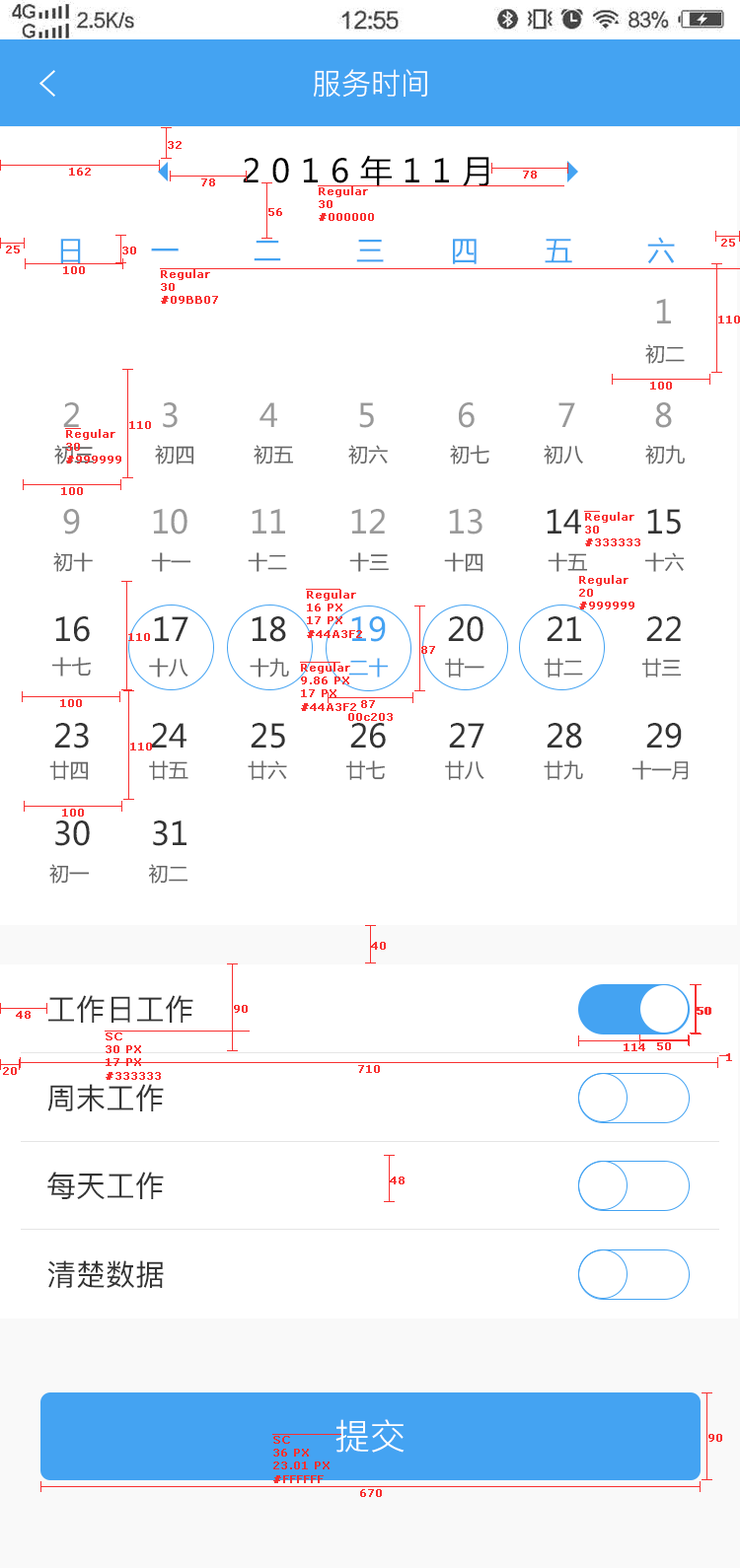
<style>
.page{position:relative;width:740px;height:1568px;background:#ffffff}
.page>*{position:absolute;margin:0}
.t1{font:29.6px "PingFang-SC-Regular";color:#ffffff;text-transform:uppercase}
.t2{font:10.8px "Verdana";color:#f83030;font-weight:bold}
.t3{font:32px "MicrosoftYaHei";letter-spacing:0.34em;color:#000000;text-transform:uppercase}
.t4{font:28px "MicrosoftYaHei";color:#44a3f2;text-transform:uppercase}
.t5{font:32px "MicrosoftYaHei";color:#999999;text-transform:uppercase}
.t6{font:19.7px "MicrosoftYaHei";color:#666666;text-transform:uppercase}
.t7{font:32px "MicrosoftYaHei";color:#333333;text-transform:uppercase}
.t8{font:32px "MicrosoftYaHei";color:#44a3f2;text-transform:uppercase}
.t9{font:19.7px "MicrosoftYaHei";color:#44a3f2;text-transform:uppercase}
.t10{font:29.6px "PingFang-SC-Medium";color:#333333;text-transform:uppercase}
.t11{font:35.5px "PingFang-SC-Regular";color:#ffffff;text-transform:uppercase}
</style>
<div class="page">
<p class="t1" style="left:314px;top:69px;width:113px;height:29px">服务时间</p>
<p class="t2" style="left:168px;top:141px;width:13px;height:8px">32</p>
<p class="t3" style="left:243px;top:155px;width:246px;height:32px">2016年11月</p>
<p class="t2" style="left:69px;top:168px;width:22px;height:8px">162</p>
<p class="t2" style="left:523px;top:171px;width:13px;height:7px">78</p>
<p class="t2" style="left:201px;top:178px;width:14px;height:8px">78</p>
<p class="t2" style="left:319px;top:186px;width:55px;height:35px">Regular<br>30<br>#000000</p>
<p class="t2" style="left:268px;top:208px;width:14px;height:8px">56</p>
<p class="t2" style="left:6px;top:246px;width:14px;height:7px">25</p>
<p class="t4" style="left:60px;top:237px;width:615px;height:27px">日        一         二         三        四        五         六</p>
<p class="t2" style="left:721px;top:239px;width:14px;height:8px">25</p>
<p class="t2" style="left:122px;top:247px;width:14px;height:7px">30</p>
<p class="t2" style="left:63px;top:266px;width:22px;height:8px">100</p>
<p class="t2" style="left:161px;top:269px;width:57px;height:35px">Regular<br>30<br>#09BB07</p>
<p class="t5" style="left:656px;top:299px;width:15px;height:24px">1</p>
<p class="t2" style="left:718px;top:316px;width:22px;height:7px">110</p>
<p class="t6" style="left:645px;top:344px;width:39px;height:20px">初二</p>
<p class="t2" style="left:650px;top:382px;width:22px;height:8px">100</p>
<p class="t5" style="left:63px;top:402px;width:16px;height:25px">2</p>
<p class="t5" style="left:163px;top:402px;width:15px;height:26px">3</p>
<p class="t5" style="left:259px;top:402px;width:18px;height:25px">4</p>
<p class="t5" style="left:359px;top:402px;width:15px;height:26px">5</p>
<p class="t5" style="left:459px;top:402px;width:15px;height:26px">6</p>
<p class="t5" style="left:558px;top:402px;width:17px;height:25px">7</p>
<p class="t5" style="left:655px;top:402px;width:17px;height:26px">8</p>
<p class="t2" style="left:129px;top:421px;width:22px;height:8px">110</p>
<p class="t2" style="left:66px;top:429px;width:55px;height:34px">Regular<br>30<br>#999999</p>
<p class="t6" style="left:54px;top:445px;width:40px;height:19px">初三</p>
<p class="t6" style="left:155px;top:445px;width:39px;height:19px">初四</p>
<p class="t6" style="left:253px;top:445px;width:41px;height:19px">初五</p>
<p class="t6" style="left:348px;top:445px;width:40px;height:19px">初六</p>
<p class="t6" style="left:450px;top:445px;width:39px;height:19px">初七</p>
<p class="t6" style="left:543px;top:445px;width:40px;height:19px">初八</p>
<p class="t6" style="left:645px;top:445px;width:39px;height:19px">初九</p>
<p class="t2" style="left:61px;top:487px;width:22px;height:8px">100</p>
<p class="t5" style="left:63px;top:509px;width:17px;height:26px">9</p>
<p class="t5" style="left:153px;top:509px;width:34px;height:26px">10</p>
<p class="t5" style="left:251px;top:509px;width:34px;height:25px">11</p>
<p class="t5" style="left:351px;top:509px;width:34px;height:25px">12</p>
<p class="t5" style="left:449px;top:509px;width:33px;height:26px">13</p>
<p class="t7" style="left:546px;top:509px;width:35px;height:25px">14</p>
<p class="t7" style="left:647px;top:509px;width:33px;height:26px">15</p>
<p class="t2" style="left:585px;top:512px;width:55px;height:34px">Regular<br>30<br>#333333</p>
<p class="t6" style="left:53px;top:552px;width:40px;height:20px">初十</p>
<p class="t6" style="left:151px;top:552px;width:40px;height:20px">十一</p>
<p class="t6" style="left:248px;top:552px;width:39px;height:20px">十二</p>
<p class="t6" style="left:349px;top:552px;width:40px;height:20px">十三</p>
<p class="t6" style="left:444px;top:552px;width:39px;height:20px">十四</p>
<p class="t6" style="left:547px;top:552px;width:41px;height:20px">十五</p>
<p class="t6" style="left:644px;top:552px;width:40px;height:20px">十六</p>
<p class="t2" style="left:579px;top:575px;width:55px;height:34px">Regular<br>20<br>#999999</p>
<p class="t2" style="left:307px;top:590px;width:55px;height:48px">Regular<br>16 PX<br>17 PX<br>#44A3F2</p>
<p class="t7" style="left:55px;top:616px;width:35px;height:26px">16</p>
<p class="t7" style="left:154px;top:616px;width:34px;height:25px">17</p>
<p class="t7" style="left:251px;top:616px;width:35px;height:26px">18</p>
<p class="t8" style="left:351px;top:616px;width:35px;height:26px">19</p>
<p class="t7" style="left:448px;top:616px;width:35px;height:26px">20</p>
<p class="t7" style="left:546px;top:616px;width:35px;height:25px">21</p>
<p class="t7" style="left:646px;top:616px;width:34px;height:25px">22</p>
<p class="t2" style="left:128px;top:633px;width:22px;height:8px">110</p>
<p class="t2" style="left:421px;top:646px;width:14px;height:8px">87</p>
<p class="t6" style="left:51px;top:657px;width:40px;height:20px">十七</p>
<p class="t6" style="left:149px;top:658px;width:39px;height:19px">十八</p>
<p class="t6" style="left:249px;top:658px;width:40px;height:19px">十九</p>
<p class="t2" style="left:301px;top:663px;width:55px;height:48px">Regular<br>9.86 PX<br>17 PX<br>#44A3F2</p>
<p class="t9" style="left:348px;top:658px;width:41px;height:19px">二十</p>
<p class="t6" style="left:445px;top:658px;width:39px;height:19px">廿一</p>
<p class="t6" style="left:543px;top:658px;width:40px;height:19px">廿二</p>
<p class="t6" style="left:641px;top:658px;width:40px;height:19px">廿三</p>
<p class="t2" style="left:60px;top:699px;width:22px;height:8px">100</p>
<p class="t2" style="left:348px;top:700px;width:44px;height:21px;text-align:center">87 <br>00c203</p>
<p class="t7" style="left:54px;top:723px;width:35px;height:25px">23</p>
<p class="t7" style="left:151px;top:723px;width:35px;height:25px">24</p>
<p class="t7" style="left:250px;top:723px;width:35px;height:25px">25</p>
<p class="t7" style="left:350px;top:723px;width:36px;height:25px">26</p>
<p class="t7" style="left:449px;top:723px;width:35px;height:25px">27</p>
<p class="t7" style="left:546px;top:723px;width:36px;height:25px">28</p>
<p class="t7" style="left:646px;top:723px;width:35px;height:25px">29</p>
<p class="t2" style="left:130px;top:743px;width:22px;height:7px">110</p>
<p class="t6" style="left:49px;top:760px;width:40px;height:20px">廿四</p>
<p class="t6" style="left:149px;top:760px;width:39px;height:20px">廿五</p>
<p class="t6" style="left:248px;top:760px;width:39px;height:20px">廿六</p>
<p class="t6" style="left:345px;top:760px;width:40px;height:20px">廿七</p>
<p class="t6" style="left:445px;top:760px;width:39px;height:20px">廿八</p>
<p class="t6" style="left:543px;top:760px;width:40px;height:20px">廿九</p>
<p class="t6" style="left:631px;top:760px;width:57px;height:20px">十一月</p>
<p class="t2" style="left:62px;top:809px;width:22px;height:8px">100</p>
<p class="t7" style="left:55px;top:820px;width:35px;height:26px">30</p>
<p class="t7" style="left:153px;top:820px;width:33px;height:26px">31</p>
<p class="t6" style="left:49px;top:864px;width:41px;height:20px">初一</p>
<p class="t6" style="left:149px;top:864px;width:39px;height:20px">初二</p>
<p class="t2" style="left:371px;top:942px;width:15px;height:8px">40</p>
<p class="t10" style="left:48px;top:995px;width:145px;height:28px">工作日工作</p>
<p class="t2" style="left:16px;top:1011px;width:15px;height:8px">48</p>
<p class="t2" style="left:234px;top:1005px;width:14px;height:8px">90</p>
<p class="t2" style="left:696px;top:1007px;width:14px;height:8px">50</p>
<p class="t2" style="left:697px;top:1007px;width:14px;height:8px">50</p>
<p class="t2" style="left:106px;top:1033px;width:55px;height:47px">SC<br>30 PX<br>17 PX<br>#333333</p>
<p class="t2" style="left:623px;top:1043px;width:22px;height:8px">114</p>
<p class="t2" style="left:657px;top:1042px;width:14px;height:8px">50</p>
<p class="t2" style="left:726px;top:1053px;width:6px;height:8px">1</p>
<p class="t2" style="left:3px;top:1067px;width:14px;height:8px">20</p>
<p class="t2" style="left:358px;top:1065px;width:22px;height:8px">710</p>
<p class="t10" style="left:47px;top:1084px;width:117px;height:27px">周末工作</p>
<p class="t10" style="left:47px;top:1172px;width:117px;height:27px">每天工作</p>
<p class="t2" style="left:390px;top:1176px;width:14px;height:8px">48</p>
<p class="t10" style="left:47px;top:1260px;width:117px;height:28px">清楚数据</p>
<p class="t11" style="left:335px;top:1419px;width:69px;height:34px">提交</p>
<p class="t2" style="left:708px;top:1434px;width:14px;height:8px">90</p>
<p class="t2" style="left:273px;top:1436px;width:56px;height:47px">SC<br>36 PX<br>23.01 PX<br>#FFFFFF</p>
<p class="t2" style="left:360px;top:1489px;width:22px;height:8px">670</p>
</div>
